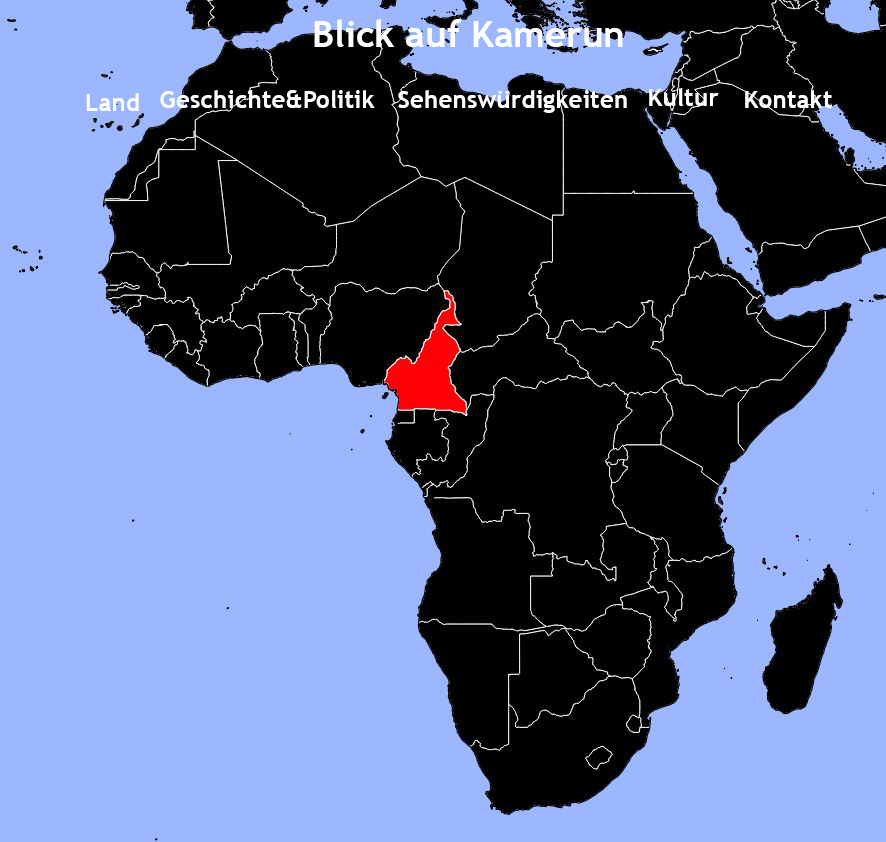
<style>
.page{position:relative;width:886px;height:842px;background:#9cb6ff}
.page>*{position:absolute;margin:0}
.t1{font:36.7px "TrebuchetMS-Bold";color:#ffffff}
.t2{font:24.4px "TrebuchetMS-Bold";color:#ffffff}
</style>
<div class="page">
<p class="t1" style="left:314px;top:19px;width:309px;height:28px">Blick auf Kamerun</p>
<p class="t2" style="left:649px;top:88px;width:70px;height:18px">Kultur</p>
<p class="t2" style="left:86px;top:93px;width:53px;height:18px">Land</p>
<p class="t2" style="left:160px;top:90px;width:215px;height:18px">Geschichte&amp;Politik</p>
<p class="t2" style="left:398px;top:90px;width:229px;height:23px">Sehenswürdigkeiten</p>
<p class="t2" style="left:745px;top:90px;width:87px;height:18px">Kontakt</p>
</div>
